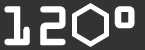
<style>
.page{position:relative;width:145px;height:50px;background:#333333}
.page>*{position:absolute;margin:0}
.t1{font:48px "OCRAStd";color:#ffffff;font-weight:bold}
</style>
<div class="page">
<p class="t1" style="left:4px;top:6px;width:131px;height:40px">12 °</p>
</div>
